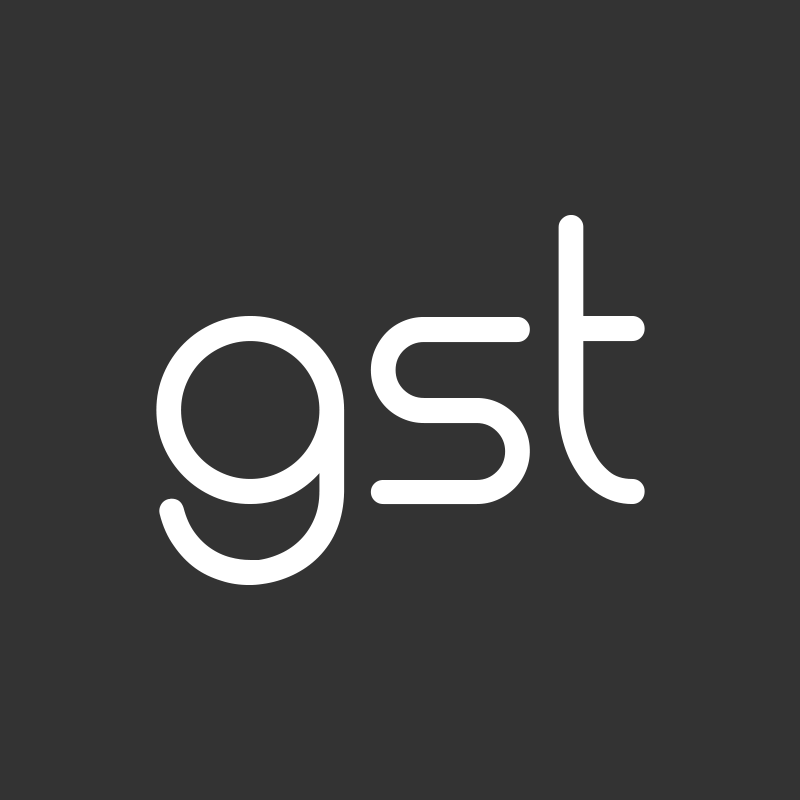
<style>
.page{position:relative;width:800px;height:800px;background:#333333}
.page>*{position:absolute;margin:0}
.t1{font:416.7px "Biysk-Regular";color:#ffffff}
</style>
<div class="page">
<p class="t1" style="left:156px;top:215px;width:489px;height:370px">gsT</p>
</div>
